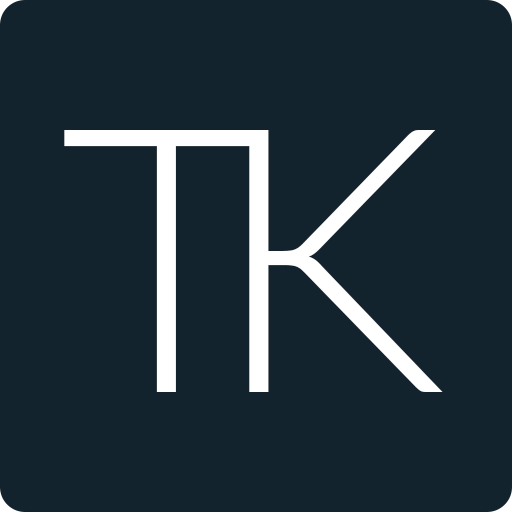
<style>
.page{position:relative;width:512px;height:512px;background:#13232e}
.page>*{position:absolute;margin:0}
.t1{font:370px "Lato-Light";letter-spacing:0.005em;color:#ffffff}
</style>
<div class="page">
<p class="t1" style="left:64px;top:130px;width:204px;height:262px">T</p>
<p class="t1" style="left:249px;top:130px;width:194px;height:262px">K</p>
</div>
